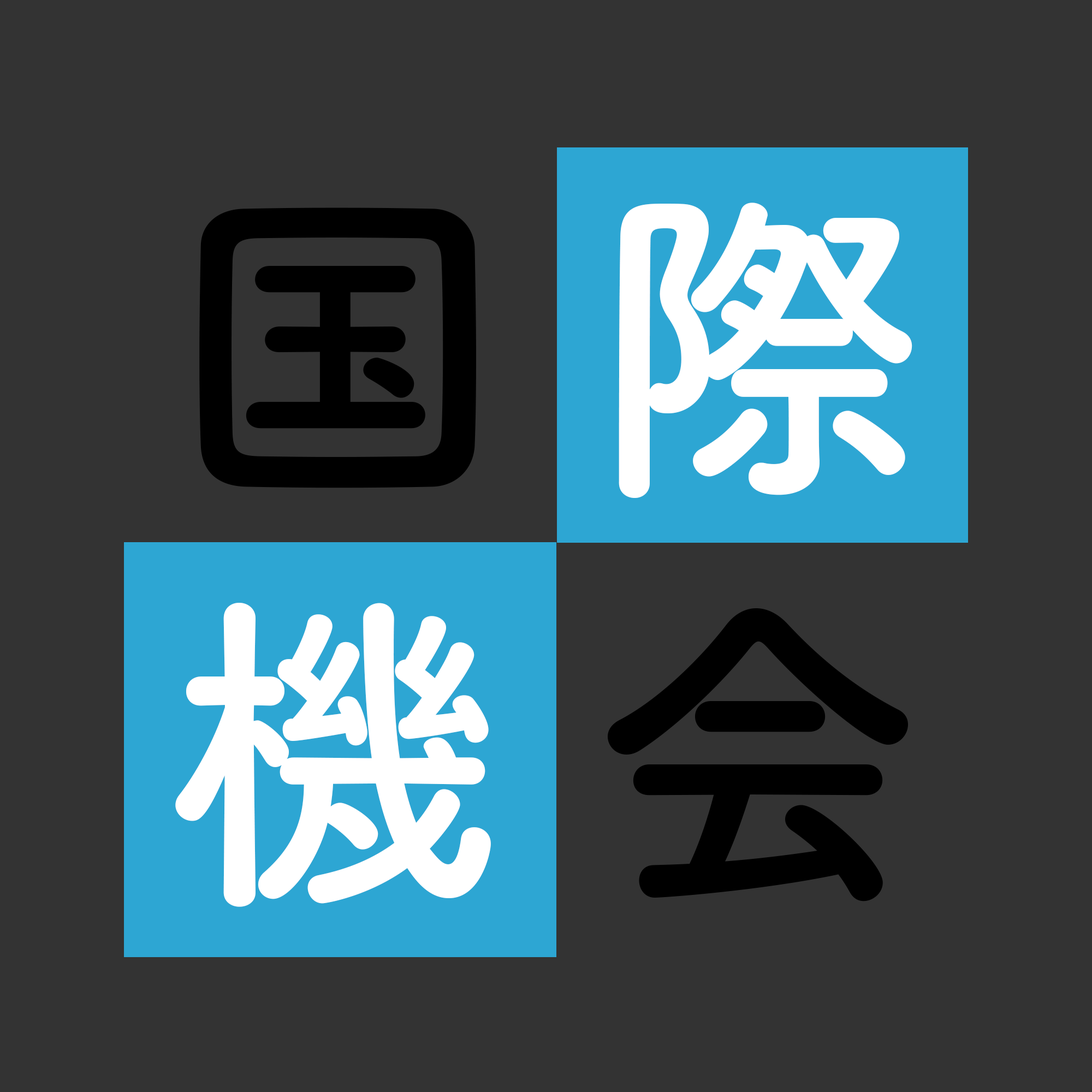
<style>
.page{position:relative;width:1092px;height:1092px;background:#333333}
.page>*{position:absolute;margin:0}
.t1{font:341.2px "TsukuARdGothic-Bold";letter-spacing:-0.025em;color:#ffffff}
.t2{font:341.2px "TsukuARdGothic-Bold";letter-spacing:-0.025em;color:#000000}
</style>
<div class="page">
<p class="t1" style="left:175px;top:203px;width:737px;height:704px;text-align:center"><span class="t2">国 </span>際<br>機<span class="t2"> 会</span></p>
</div>
